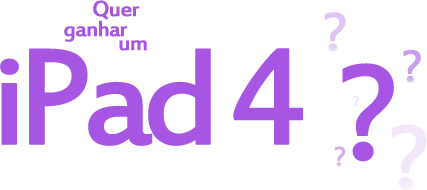
<style>
.page{position:relative;width:427px;height:190px;background:#ffffff}
.page>*{position:absolute;margin:0}
.t1{font:24px "EstrangeloEdessa";letter-spacing:-0.05em;color:#a656e3;font-weight:bold}
.t2{font:60px "EstrangeloEdessa";letter-spacing:-0.1em;color:#e0c4f5;font-weight:bold}
.t3{font:150px "EstrangeloEdessa";letter-spacing:-0.1em;color:#a656e3;font-weight:bold}
.t4{font:50px "EstrangeloEdessa";letter-spacing:-0.1em;color:#ca9aee;font-weight:bold}
.t5{font:15px "EstrangeloEdessa";letter-spacing:-0.1em;color:#edddf9;font-weight:bold}
.t6{font:100px "EstrangeloEdessa";letter-spacing:-0.1em;color:#f2e6fb;font-weight:bold}
.t7{font:30px "EstrangeloEdessa";letter-spacing:-0.1em;color:#d2aaf1;font-weight:bold}
</style>
<div class="page">
<p class="t1" style="left:93px;top:0px;width:47px;height:20px">Quer</p>
<p class="t2" style="left:324px;top:12px;width:22px;height:40px">?</p>
<p class="t1" style="left:64px;top:20px;width:64px;height:22px">ganhar</p>
<p class="t1" style="left:119px;top:40px;width:28px;height:11px">um</p>
<p class="t3" style="left:0px;top:48px;width:303px;height:98px">iPad 4</p>
<p class="t4" style="left:403px;top:49px;width:18px;height:34px">?</p>
<p class="t3" style="left:342px;top:63px;width:52px;height:99px">?</p>
<p class="t5" style="left:353px;top:96px;width:6px;height:11px">?</p>
<p class="t6" style="left:392px;top:124px;width:35px;height:66px">?</p>
<p class="t7" style="left:334px;top:146px;width:12px;height:21px">?</p>
</div>
